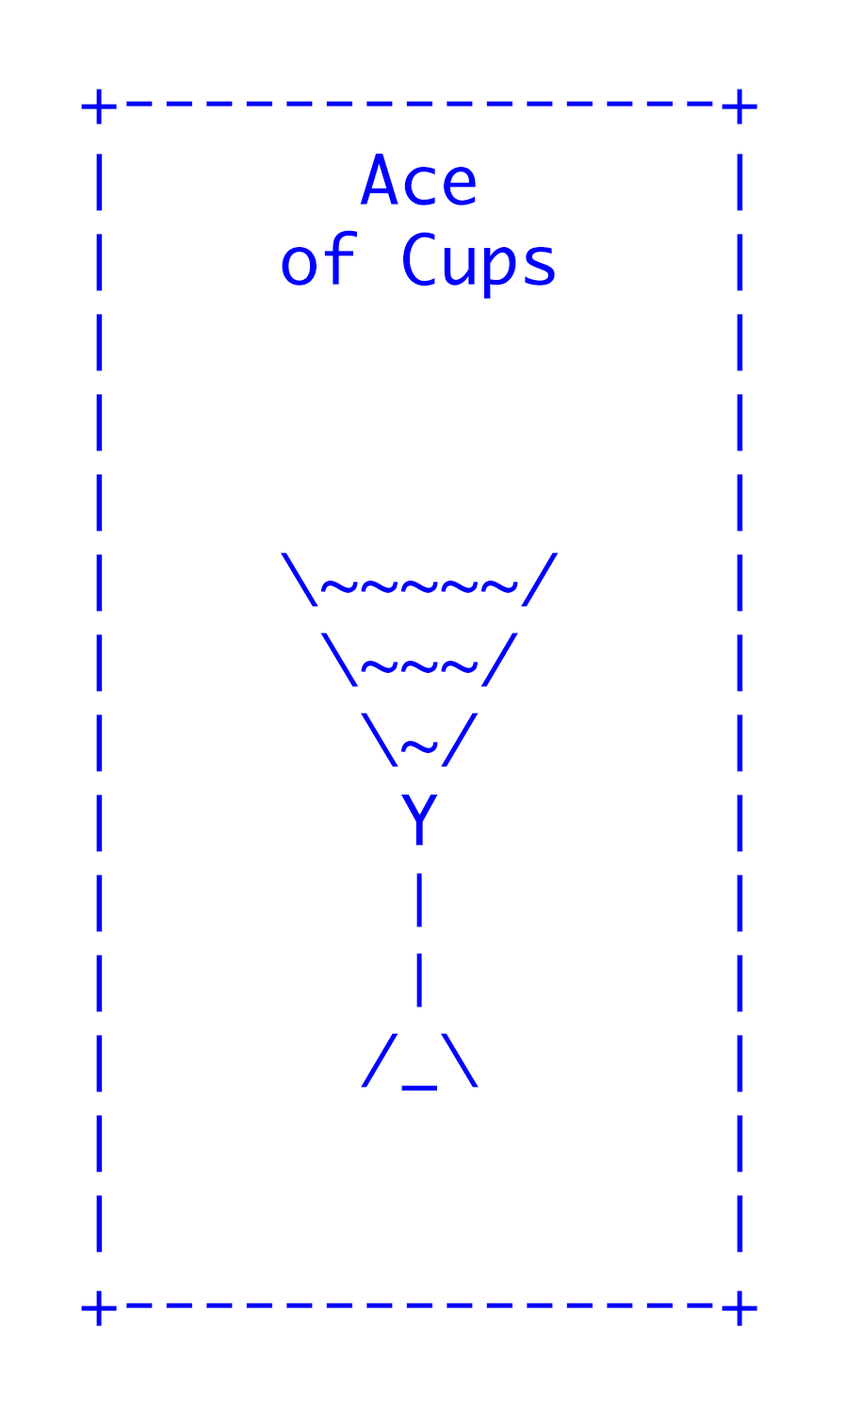
<style>
.page{position:relative;width:845px;height:1411px;background:#ffffff}
.page>*{position:absolute;margin:0}
.t1{font:66.7px "Monaco";color:#0000ff}
</style>
<div class="page">
<p class="t1" style="left:81px;top:89px;width:677px;height:1237px">+---------------+<br>│      Ace      │<br>│    of Cups    │<br>│               │<br>│               │ <br>│               │<br>│    \~~~~~/    │<br>│     \~~~/     │ <br>│      \~/      │ <br>│       Y       │<br>│       |       │<br>│       |       │<br>│      /_\      │ <br>│               │<br>│               │<br>+---------------+</p>
</div>
